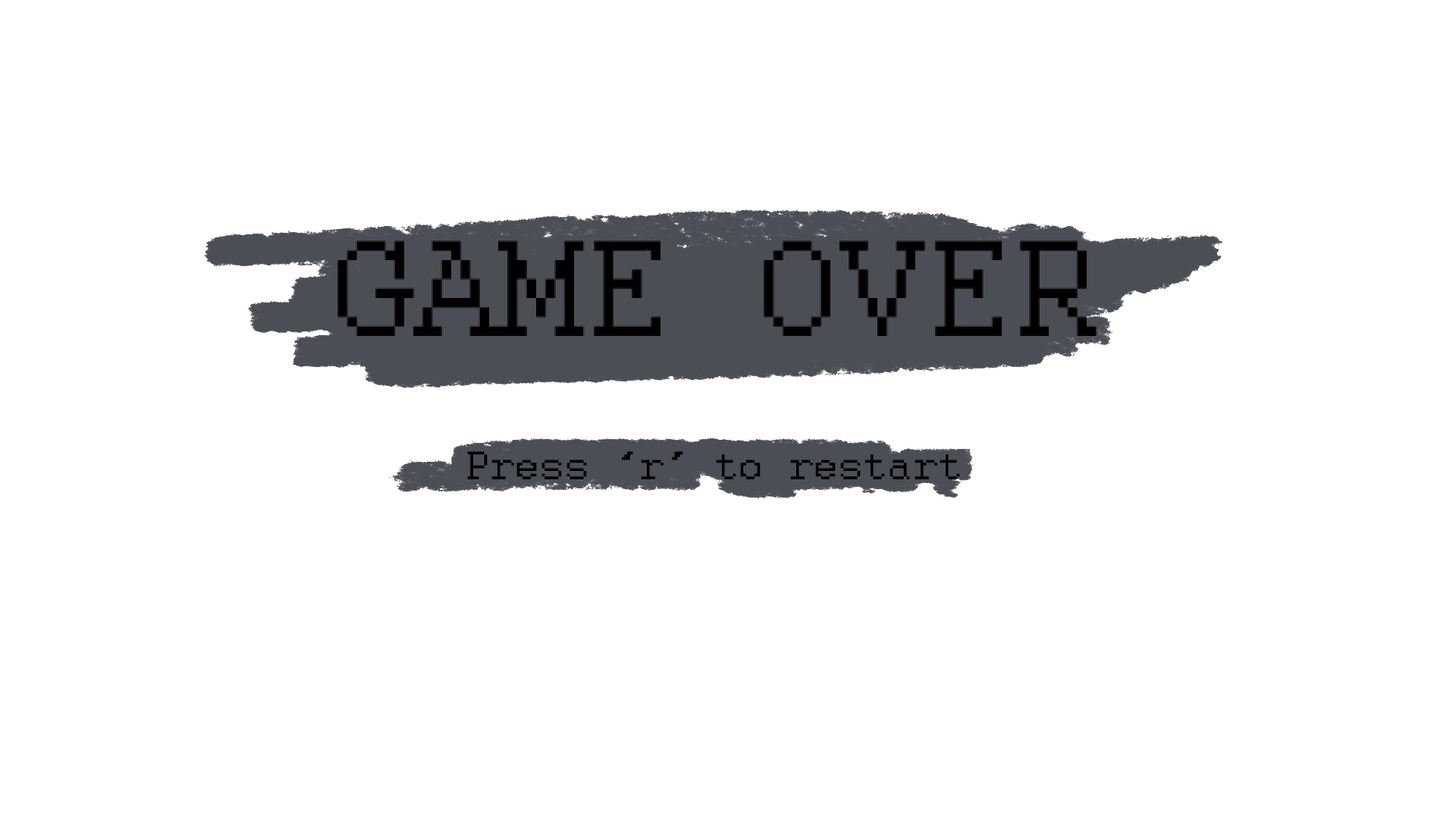
<style>
.page{position:relative;width:1456px;height:819px;background:#ffffff}
.page>*{position:absolute;margin:0}
.t1{font:151.7px "Courier";color:#000000}
.t2{font:44.2px "Courier";color:#000000}
</style>
<div class="page">
<p class="t1" style="left:337px;top:240px;width:760px;height:96px">GAME OVER</p>
<p class="t2" style="left:467px;top:451px;width:493px;height:28px">Press ‘r’ to restart</p>
</div>
